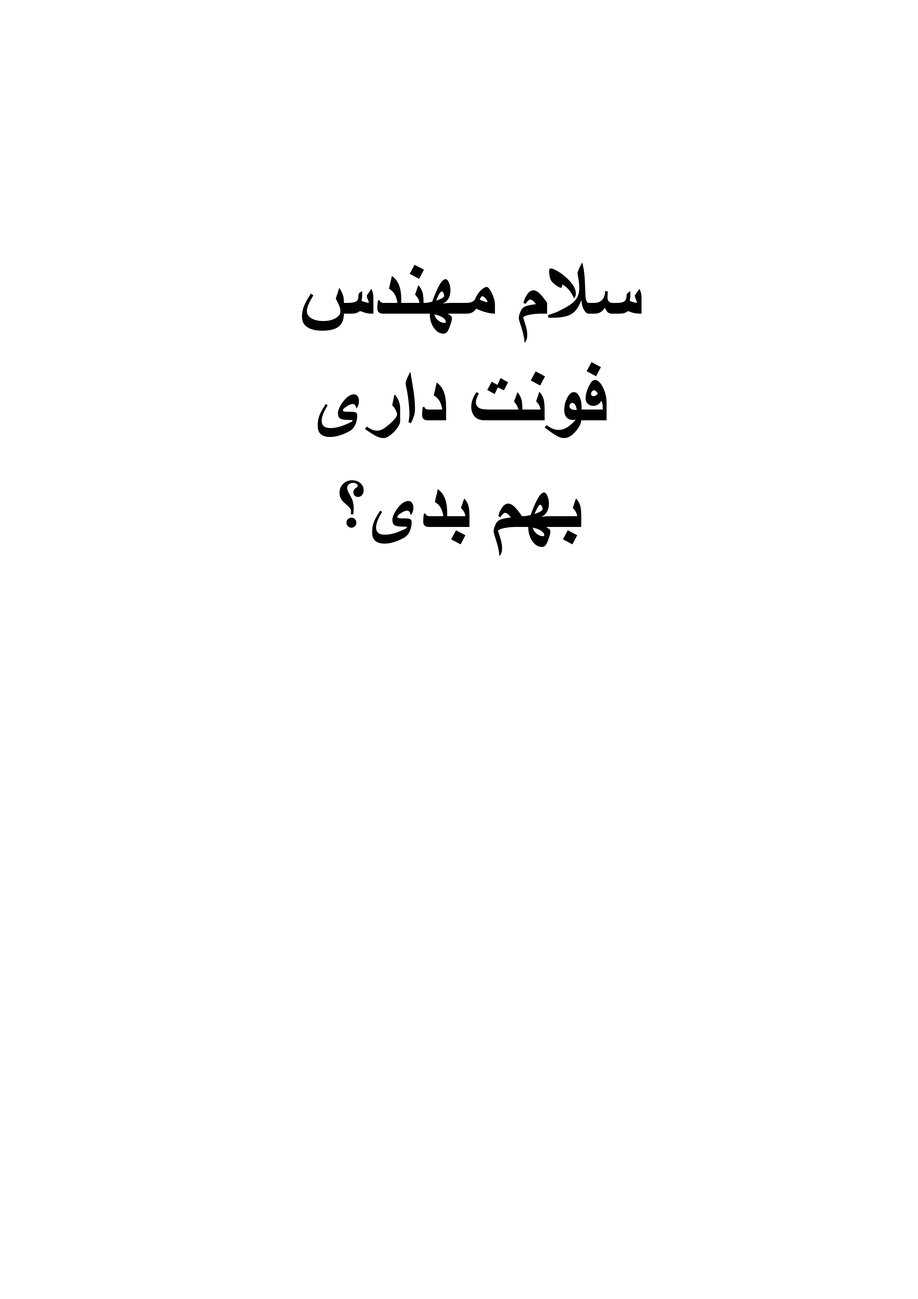
<style>
.page{position:relative;width:918px;height:1299px;background:#ffffff}
.page>*{position:absolute;margin:0}
.t1{font:82.1px/106.6px "Arial-BoldMT";color:#000000}
</style>
<div class="page">
<p class="t1" style="left:302px;top:262px;width:340px;height:294px;text-align:center">سلام مهندس <br>فونت داری<br>بهم بدی؟</p>
</div>
